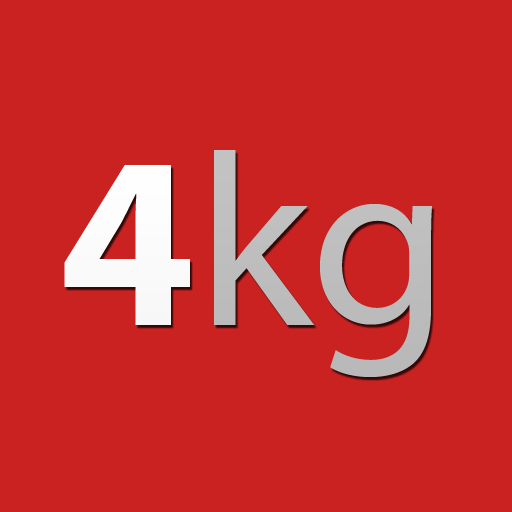
<style>
.page{position:relative;width:512px;height:512px;background:#ca2121}
.page>*{position:absolute;margin:0}
.t1{font:246.3px "MyriadPro-Regular";color:#c0c0c0}
.t2{font:246.3px "MyriadPro-Bold";color:#ffffff}
</style>
<div class="page">
<p class="t1" style="left:64px;top:150px;width:368px;height:227px"><span class="t2">4</span>kg</p>
</div>
